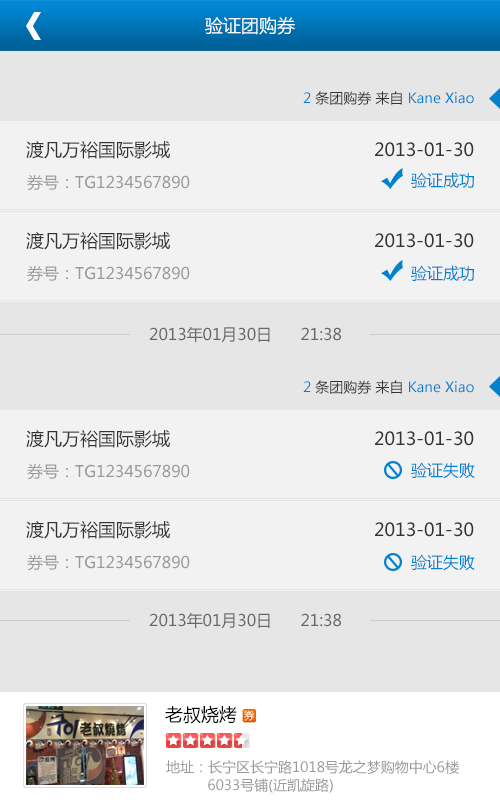
<style>
.page{position:relative;width:500px;height:800px;background:#f2f2f2}
.page>*{position:absolute;margin:0}
.t1{font:18px "MicrosoftYaHei";color:#ffffff}
.t2{font:14px "MicrosoftYaHei";color:#0082cc}
.t3{font:14px "MicrosoftYaHei";color:#333333}
.t4{font:18px "MicrosoftYaHei";color:#333333}
.t5{font:16px "MicrosoftYaHei";color:#999999}
.t6{font:16px "MicrosoftYaHei";color:#0082cc}
.t7{font:16px "MicrosoftYaHei";color:#666666}
.t8{font:18px "MicrosoftYaHei";color:#000000}
.t9{font:14px/18px "MicrosoftYaHei";color:#999999}
</style>
<div class="page">
<p class="t1" style="left:205px;top:17px;width:90px;height:18px">验证团购券</p>
<p class="t2" style="left:303px;top:91px;width:171px;height:15px">2 <span class="t3">条团购券 来自</span> Kane Xiao</p>
<p class="t4" style="left:26px;top:141px;width:144px;height:18px">渡凡万裕国际影城</p>
<p class="t4" style="left:375px;top:142px;width:99px;height:15px">2013-01-30</p>
<p class="t5" style="left:27px;top:174px;width:163px;height:17px">券号：TG1234567890</p>
<p class="t6" style="left:411px;top:172px;width:63px;height:16px">验证成功</p>
<p class="t4" style="left:26px;top:232px;width:144px;height:18px">渡凡万裕国际影城</p>
<p class="t4" style="left:375px;top:233px;width:99px;height:15px">2013-01-30</p>
<p class="t5" style="left:27px;top:265px;width:163px;height:17px">券号：TG1234567890</p>
<p class="t6" style="left:411px;top:265px;width:63px;height:16px">验证成功</p>
<p class="t7" style="left:149px;top:326px;width:192px;height:17px">2013年01月30日      21:38</p>
<p class="t2" style="left:303px;top:380px;width:171px;height:15px">2 <span class="t3">条团购券 来自</span> Kane Xiao</p>
<p class="t4" style="left:26px;top:430px;width:144px;height:18px">渡凡万裕国际影城</p>
<p class="t4" style="left:375px;top:431px;width:99px;height:15px">2013-01-30</p>
<p class="t6" style="left:411px;top:462px;width:64px;height:17px">验证失败</p>
<p class="t5" style="left:27px;top:463px;width:163px;height:17px">券号：TG1234567890</p>
<p class="t4" style="left:26px;top:521px;width:144px;height:18px">渡凡万裕国际影城</p>
<p class="t4" style="left:375px;top:522px;width:99px;height:15px">2013-01-30</p>
<p class="t5" style="left:27px;top:554px;width:163px;height:17px">券号：TG1234567890</p>
<p class="t6" style="left:411px;top:554px;width:64px;height:17px">验证失败</p>
<p class="t7" style="left:149px;top:612px;width:192px;height:17px">2013年01月30日      21:38</p>
<p class="t8" style="left:165px;top:705px;width:72px;height:19px">老叔烧烤</p>
<p class="t9" style="left:166px;top:760px;width:293px;height:33px">地址：长宁区长宁路1018号龙之梦购物中心6楼<br>          6033号铺(近凯旋路)</p>
</div>
